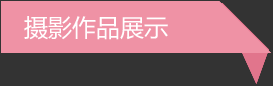
<style>
.page{position:relative;width:273px;height:86px;background:#ef92a5}
.page>*{position:absolute;margin:0}
.t1{font:24px "MicrosoftYaHei";color:#ffffff}
</style>
<div class="page">
<p class="t1" style="left:24px;top:16px;width:144px;height:24px">摄影作品展示</p>
</div>
